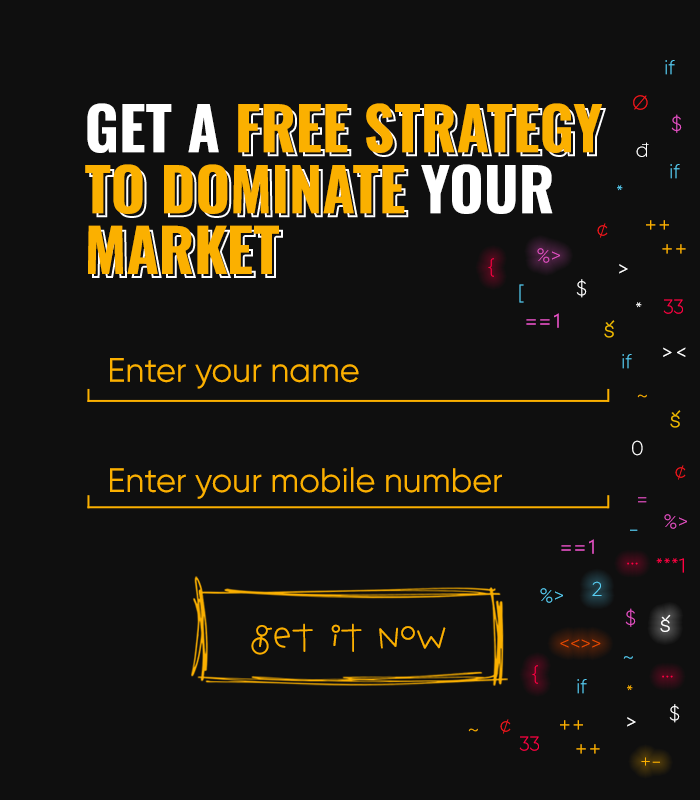
<style>
.page{position:relative;width:700px;height:800px;background:#0f0f0f}
.page>*{position:absolute;margin:0}
.t1{font:20px "Gilroy-Light";color:#58cef3}
.t2{font:20px "Gilroy-Light";color:#fb161c}
.t3{font:59.4px/60.9px "Oswald-Bold";color:#fbb000;text-transform:uppercase}
.t4{font:59.4px/60.9px "Oswald-Bold";color:#ffffff;text-transform:uppercase}
.t5{font:20px "Gilroy-Light";color:#e451c3}
.t6{font:20px "Gilroy-Light";color:#ffffff}
.t7{font:20px "NirmalaUI";color:#fbb000}
.t8{font:20px "Gilroy-Light";color:#ff0043}
.t9{font:20px "NirmalaUI";color:#ffffff}
.t10{font:20px "Gilroy-Light"}
.t11{font:20px "NirmalaUI";color:#e451c3}
.t12{font:20px "NirmalaUI";color:#eeba00}
.t13{font:34px "Gilroy-Regular";color:#fbb000}
.t14{font:20px "Gilroy-Light";color:#fbb000}
.t15{font:39.8px "HopscotchPlain";color:#fbb000}
.t16{font:20px "Gilroy-Light";color:#ec4a00}
</style>
<div class="page">
<p class="t1" style="left:665px;top:60px;width:10px;height:15px">if</p>
<p class="t2" style="left:633px;top:95px;width:15px;height:15px">Ø</p>
<p class="t3" style="left:85px;top:103px;width:517px;height:171px"><span class="t4">Get a </span>free strategy to dominate<span class="t4"> your </span>market</p>
<p class="t5" style="left:671px;top:114px;width:11px;height:19px">$</p>
<p class="t6" style="left:636px;top:142px;width:13px;height:15px">đ</p>
<p class="t1" style="left:670px;top:164px;width:10px;height:15px">if</p>
<p class="t1" style="left:617px;top:185px;width:6px;height:6px">*</p>
<p class="t7" style="left:646px;top:220px;width:40px;height:34px;text-align:center">++<br>      ++</p>
<p class="t2" style="left:597px;top:223px;width:11px;height:15px">¢</p>
<p class="t5" style="left:537px;top:248px;width:23px;height:15px">%&gt;</p>
<p class="t8" style="left:488px;top:258px;width:6px;height:19px">{</p>
<p class="t9" style="left:619px;top:264px;width:9px;height:10px">&gt;</p>
<p class="t6" style="left:576px;top:279px;width:11px;height:19px">$</p>
<p class="t10" style="left:519px;top:284px;width:5px;height:19px">[</p>
<p class="t6" style="left:636px;top:302px;width:6px;height:6px">*</p>
<p class="t8" style="left:663px;top:299px;width:20px;height:15px">33</p>
<p class="t11" style="left:526px;top:313px;width:33px;height:15px">==1</p>
<p class="t12" style="left:604px;top:320px;width:11px;height:18px">క</p>
<p class="t9" style="left:663px;top:347px;width:23px;height:10px">&gt;&lt;</p>
<p class="t13" style="left:110px;top:358px;width:249px;height:31px">Enter your name</p>
<p class="t1" style="left:622px;top:354px;width:10px;height:15px">if</p>
<p class="t14" style="left:637px;top:394px;width:10px;height:4px">~</p>
<p class="t12" style="left:670px;top:410px;width:11px;height:18px">క</p>
<p class="t6" style="left:632px;top:440px;width:11px;height:16px">0</p>
<p class="t13" style="left:110px;top:467px;width:392px;height:32px">Enter your mobile number</p>
<p class="t2" style="left:675px;top:465px;width:11px;height:15px">¢</p>
<p class="t10" style="left:638px;top:497px;width:9px;height:6px">=</p>
<p class="t5" style="left:664px;top:514px;width:23px;height:15px">%&gt;</p>
<p class="t10" style="left:630px;top:529px;width:8px;height:2px">-</p>
<p class="t11" style="left:561px;top:539px;width:33px;height:15px">==1</p>
<p class="t8" style="left:656px;top:558px;width:28px;height:15px">***1</p>
<p class="t8" style="left:627px;top:562px;width:11px;height:3px">...</p>
<p class="t1" style="left:592px;top:581px;width:10px;height:15px">2</p>
<p class="t1" style="left:540px;top:588px;width:23px;height:15px">%&gt;</p>
<p class="t5" style="left:625px;top:608px;width:11px;height:19px">$</p>
<p class="t9" style="left:660px;top:614px;width:11px;height:18px">క</p>
<p class="t15" style="left:251px;top:623px;width:195px;height:32px">GET IT NOW</p>
<p class="t16" style="left:560px;top:639px;width:41px;height:9px">&lt;&lt;&gt;&gt;</p>
<p class="t8" style="left:532px;top:665px;width:6px;height:19px">{</p>
<p class="t1" style="left:623px;top:656px;width:10px;height:3px">~</p>
<p class="t8" style="left:662px;top:675px;width:11px;height:3px">...</p>
<p class="t1" style="left:577px;top:679px;width:10px;height:15px">if</p>
<p class="t14" style="left:627px;top:685px;width:6px;height:6px">*</p>
<p class="t6" style="left:669px;top:704px;width:11px;height:19px">$</p>
<p class="t2" style="left:500px;top:719px;width:11px;height:15px">¢</p>
<p class="t7" style="left:560px;top:720px;width:40px;height:34px;text-align:center">++<br>      ++</p>
<p class="t9" style="left:627px;top:717px;width:9px;height:10px">&gt;</p>
<p class="t14" style="left:468px;top:728px;width:10px;height:4px">~</p>
<p class="t8" style="left:519px;top:736px;width:20px;height:15px">33</p>
<p class="t14" style="left:641px;top:757px;width:19px;height:9px">+-</p>
</div>
